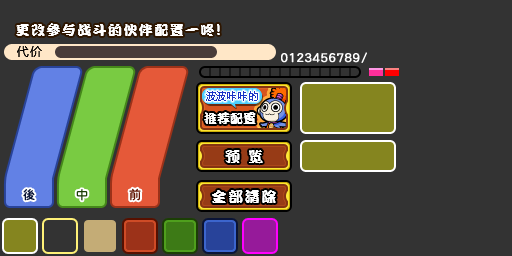
<style>
.page{position:relative;width:512px;height:256px;background:#333333}
.page>*{position:absolute;margin:0}
.t1{font:14px "DFPKanTingLiuW9";letter-spacing:0.1em;color:#ffffff}
.t2{font:16px "DFPKanTingLiuW9";letter-spacing:0.1em;color:#ffffff}
.t3{font:12px "MicrosoftYaHei";letter-spacing:0.1em;color:#000000}
.t4{font:10px "MicrosoftYaHei";color:#1936c7}
.t5{font:11px "MicrosoftYaHei";color:#1936c7}
.t6{font:13px "DFPKanTingLiuW9";color:#ffffff}
.t7{font:15px "DFPKanTingLiuW9";letter-spacing:0.1em;color:#ffffff}
</style>
<div class="page">
<p class="t1" style="left:16px;top:23px;width:204px;height:13px">更改参与战斗的伙伴配置一咚<span class="t2">!</span></p>
<p class="t3" style="left:17px;top:46px;width:25px;height:11px">代价</p>
<p class="t3" style="left:17px;top:46px;width:25px;height:11px">代价</p>
<p class="t4" style="left:206px;top:91px;width:52px;height:10px">波波<span class="t5">咔咔</span>的</p>
<p class="t6" style="left:204px;top:112px;width:52px;height:12px">推荐配置</p>
<p class="t7" style="left:225px;top:150px;width:38px;height:14px">预 览</p>
<p class="t7" style="left:212px;top:190px;width:64px;height:13px">全部清除</p>
</div>
